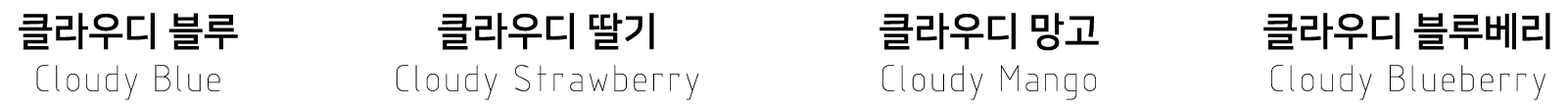
<style>
.page{position:relative;width:1568px;height:108px;background:#ffffff}
.page>*{position:absolute;margin:0}
.t1{font:39.2px "GENISO";letter-spacing:-0.01em;color:#000000}
.t2{font:39.2px "NanumSquareB";letter-spacing:-0.01em;color:#000000}
</style>
<div class="page">
<p class="t1" style="left:19px;top:13px;width:219px;height:87px;text-align:center"><span class="t2">클라우디 블루<br></span>Cloudy Blue</p>
<p class="t1" style="left:396px;top:13px;width:303px;height:87px;text-align:center"><span class="t2">클라우디 딸기<br></span>Cloudy Strawberry</p>
<p class="t1" style="left:879px;top:13px;width:220px;height:87px;text-align:center"><span class="t2">클라우디 망고<br></span>Cloudy Mango</p>
<p class="t1" style="left:1263px;top:13px;width:287px;height:87px;text-align:center"><span class="t2">클라우디 블루베리<br></span>Cloudy Blueberry</p>
</div>
